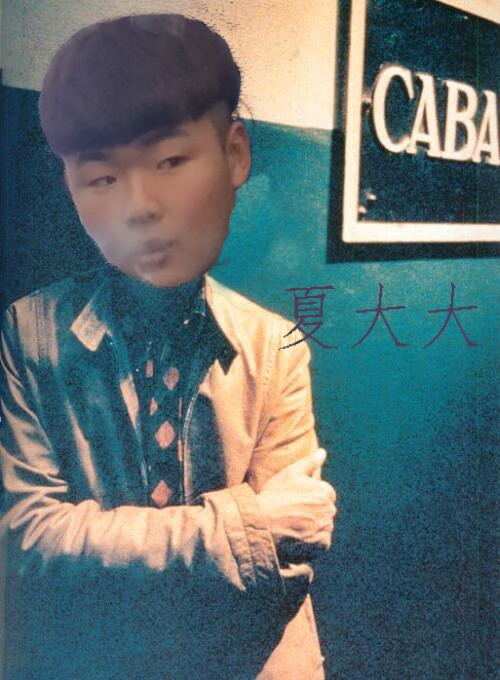
<style>
.page{position:relative;width:500px;height:680px}
.page>*{position:absolute;margin:0}
.t1{font:72px "·ÂËÎ";color:#503c56}
</style>
<div class="page">
<p class="t1" style="left:278px;top:282px;width:205px;height:68px">夏大大</p>
</div>
